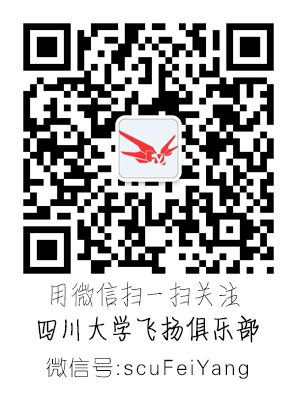
<style>
.page{position:relative;width:300px;height:400px;background:#ffffff}
.page>*{position:absolute;margin:0}
.t1{font:26px "MFQingShu_Noncommercial-Regular";letter-spacing:0.1em;color:#070707}
.t2{font:26px "MFQingShu_Noncommercial-Regular";letter-spacing:0.1em;color:#070707;font-weight:bold}
.t3{font:21px "FZY1JW--GB1-0";letter-spacing:0.1em;color:#070707}
</style>
<div class="page">
<p class="t1" style="left:51px;top:281px;width:189px;height:27px">用微信扫一扫关注</p>
<p class="t2" style="left:38px;top:315px;width:221px;height:28px">四川大学飞扬俱乐部</p>
<p class="t3" style="left:46px;top:357px;width:202px;height:22px">微信号:scuFeiYang</p>
</div>
